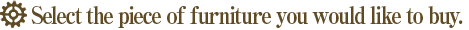
<style>
.page{position:relative;width:469px;height:30px;background:#ffffff}
.page>*{position:absolute;margin:0}
.t1{font:24px "RyuminPro-ExBold";letter-spacing:-0.08em;color:#5f4a23;scale:0.9 1}
</style>
<div class="page">
<p class="t1" style="left:31px;top:6px;width:432px;height:22px">Select the piece of furniture you would like to buy.</p>
</div>
